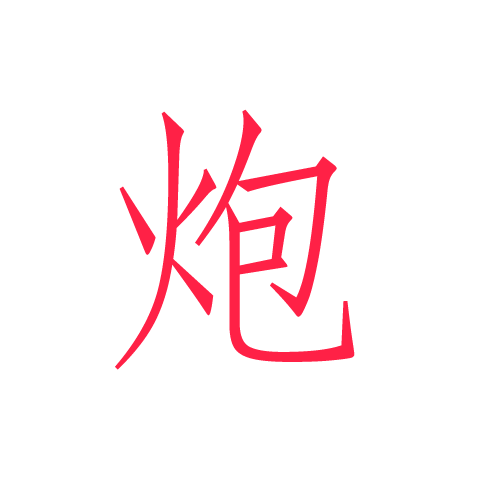
<style>
.page{position:relative;width:480px;height:480px;background:#ffffff}
.page>*{position:absolute;margin:0}
.t1{font:288px "STFangsong";color:#ff2146}
</style>
<div class="page">
<p class="t1" style="left:115px;top:109px;width:240px;height:261px">炮</p>
</div>
